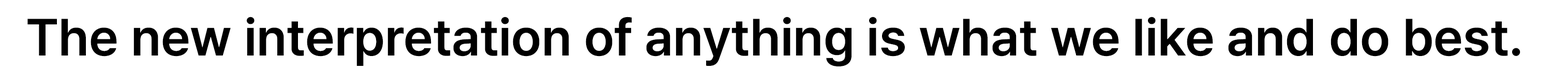
<style>
.page{position:relative;width:1568px;height:83px;background:#ffffff}
.page>*{position:absolute;margin:0}
.t1{font:51.7px "Pretendard-SemiBold";color:#000000}
</style>
<div class="page">
<p class="t1" style="left:27px;top:17px;width:1493px;height:49px">The new interpretation of anything is what we like and do best.</p>
</div>
